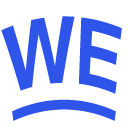
<style>
.page{position:relative;width:128px;height:128px;background:#ffffff}
.page>*{position:absolute;margin:0}
.t1{font:91.9px "Arial-BoldMT";color:#2e54e9;text-decoration:underline;scale:0.64 1}
</style>
<div class="page">
<p class="t1" style="left:1px;top:16px;width:121px;height:105px">WE</p>
</div>
